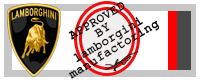
<style>
.page{position:relative;width:200px;height:80px;background:#ffffff}
.page>*{position:absolute;margin:0}
.t1{font:12.4px/11px "CourierNewPSMT";color:#000000;font-weight:bold}
</style>
<div class="page">
<p class="t1" style="left:68px;top:2px;width:91px;height:77px;text-align:center;rotate:-31deg">APPROVED<br>BY<br>lamborgini<br>manufactoring</p>
</div>
